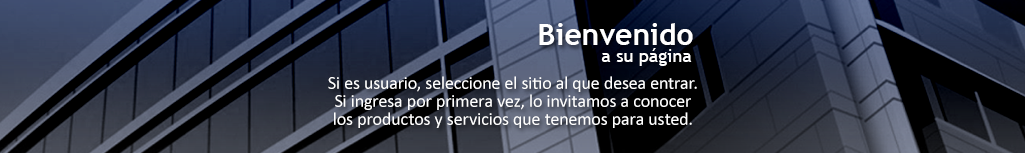
<style>
.page{position:relative;width:1025px;height:153px}
.page>*{position:absolute;margin:0}
.t1{font:30px "TrebuchetMS-Bold";color:#ffffff}
.t2{font:18px "TrebuchetMS";color:#ffffff}
.t3{font:18px/18px "Calibri";color:#ffffff}
</style>
<div class="page">
<p class="t1" style="left:539px;top:23px;width:154px;height:22px">Bienvenido</p>
<p class="t2" style="left:601px;top:48px;width:91px;height:18px">a su página</p>
<p class="t3" style="left:328px;top:76px;width:369px;height:52px;text-align:center">Si es usuario, seleccione el sitio al que desea entrar.<br>Si ingresa por primera vez, lo invitamos a conocer los productos y servicios que tenemos para usted.</p>
</div>
